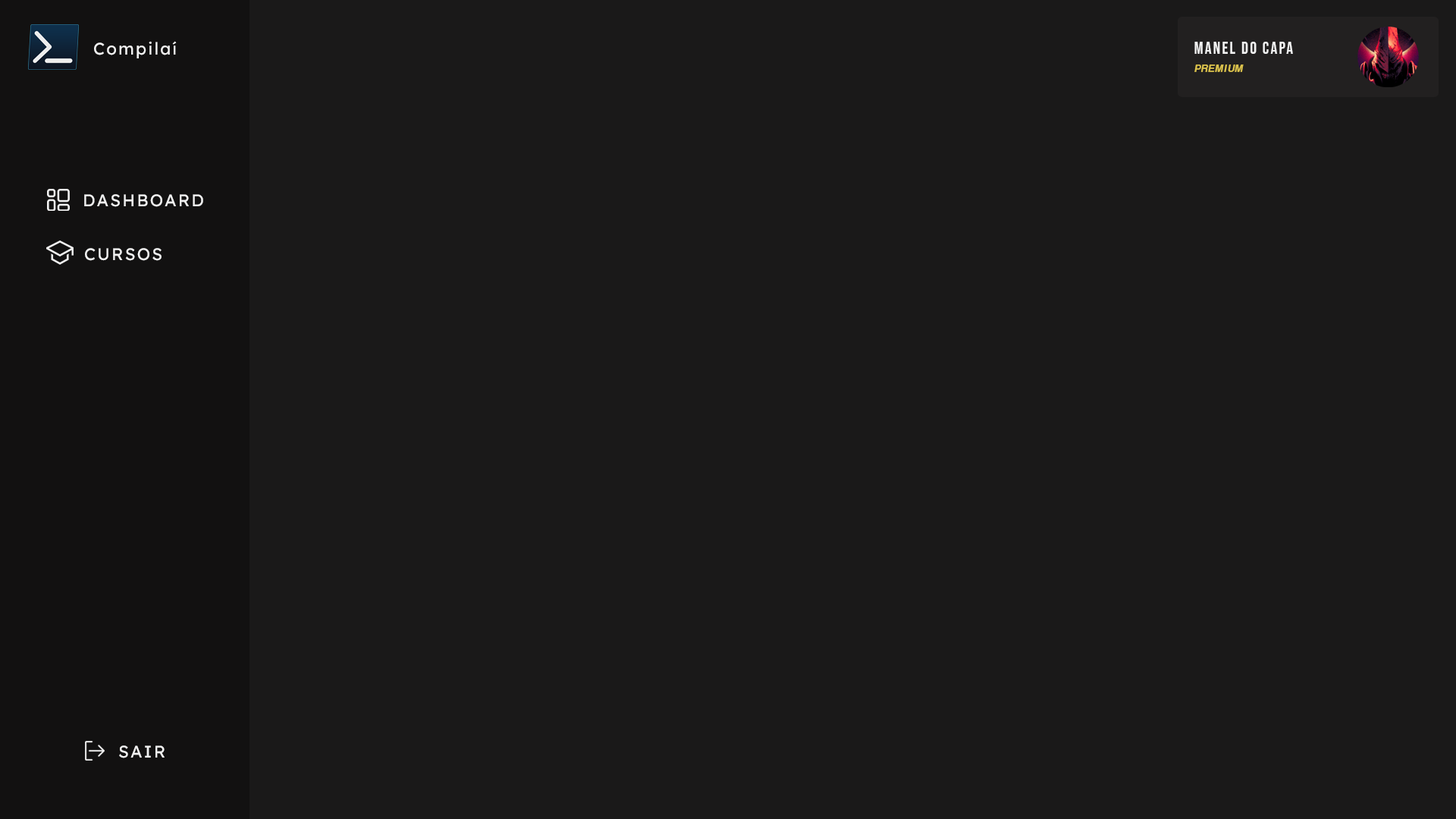
<style>
.page{position:relative;width:1456px;height:819px;background:#1a1919}
.page>*{position:absolute;margin:0}
.t1{font:16.9px "Lexend-Regular";letter-spacing:0.1em;color:#f2f2f2}
.t2{font:16.6px "BebasNeue-Regular";letter-spacing:0.1em;color:#f2f2f2}
.t3{font:11.1px "CoolveticaRg-Italic";letter-spacing:0.1em;color:#dbc24c}
</style>
<div class="page">
<p class="t1" style="left:94px;top:41px;width:83px;height:17px">Compilaí</p>
<p class="t2" style="left:1194px;top:42px;width:99px;height:12px">MANEL DO CAPA</p>
<p class="t3" style="left:1194px;top:64px;width:50px;height:8px">PREMIUM</p>
<p class="t1" style="left:84px;top:194px;width:119px;height:13px">DASHBOARD</p>
<p class="t1" style="left:85px;top:248px;width:77px;height:13px">CURSOS</p>
<p class="t1" style="left:119px;top:745px;width:46px;height:13px">SAIR</p>
</div>
